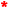
<style>
.page{position:relative;width:8px;height:8px;background:#ffffff}
.page>*{position:absolute;margin:0}
.t1{font:15px "BellGothicStd-Bold";color:#ff0000;font-weight:bold}
</style>
<div class="page">
<p class="t1" style="left:1px;top:1px;width:7px;height:6px">*</p>
</div>
